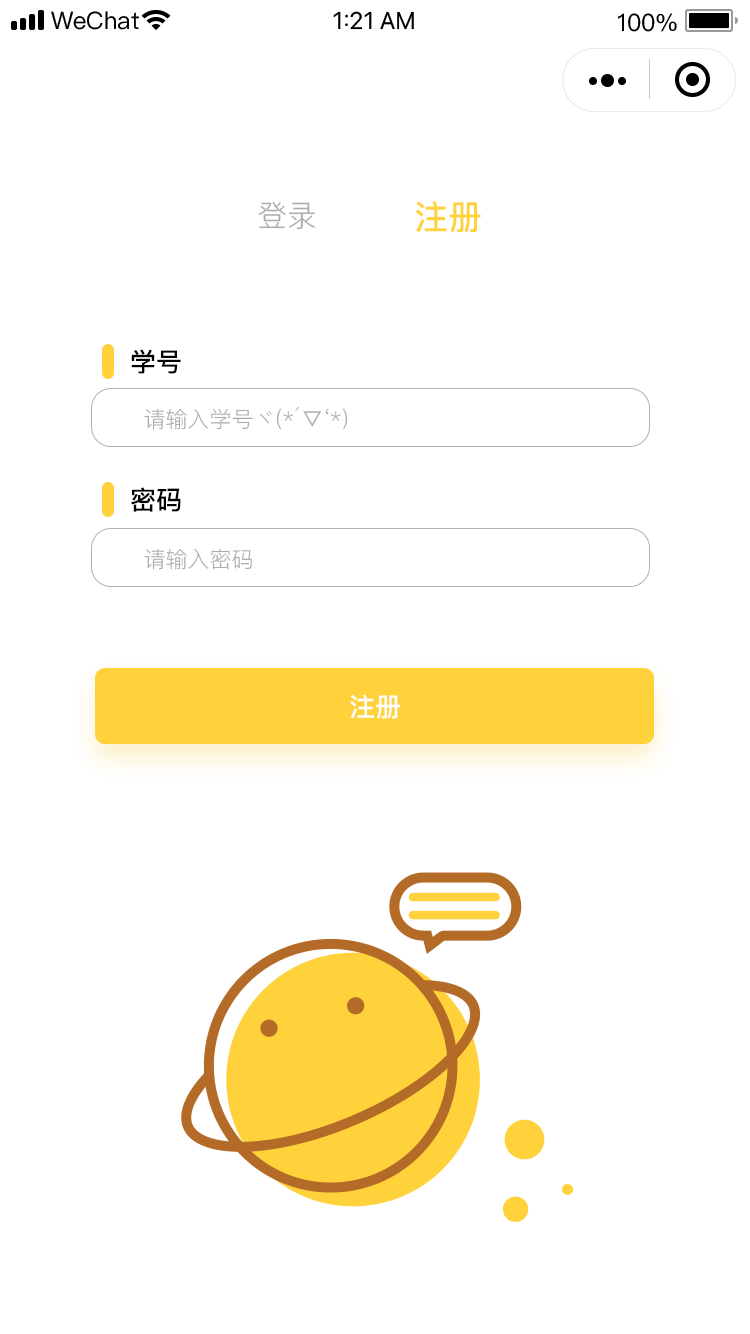
<style>
.page{position:relative;width:750px;height:1334px;background:#ffffff}
.page>*{position:absolute;margin:0}
.t1{font:30px "PingFang-SC-Regular";color:#adadad}
.t2{font:34px "PingFang-SC-Bold";color:#ffd23b}
.t3{font:26px "PingFang-SC-Bold";color:#000000}
.t4{font:22px "PingFang-SC-Regular";color:#adadad}
.t5{font:26px "PingFang-SC-Bold";color:#ffffff}
</style>
<div class="page">
<p class="t1" style="left:258px;top:202px;width:57px;height:28px">登录</p>
<p class="t2" style="left:415px;top:201px;width:66px;height:32px">注册</p>
<p class="t3" style="left:131px;top:349px;width:50px;height:25px">学号</p>
<p class="t4" style="left:144px;top:407px;width:204px;height:23px">请输入学号ヾ(*´▽‘*)</p>
<p class="t3" style="left:131px;top:487px;width:50px;height:25px">密码</p>
<p class="t4" style="left:144px;top:549px;width:108px;height:21px">请输入密码</p>
<p class="t5" style="left:350px;top:694px;width:50px;height:25px">注册</p>
</div>
